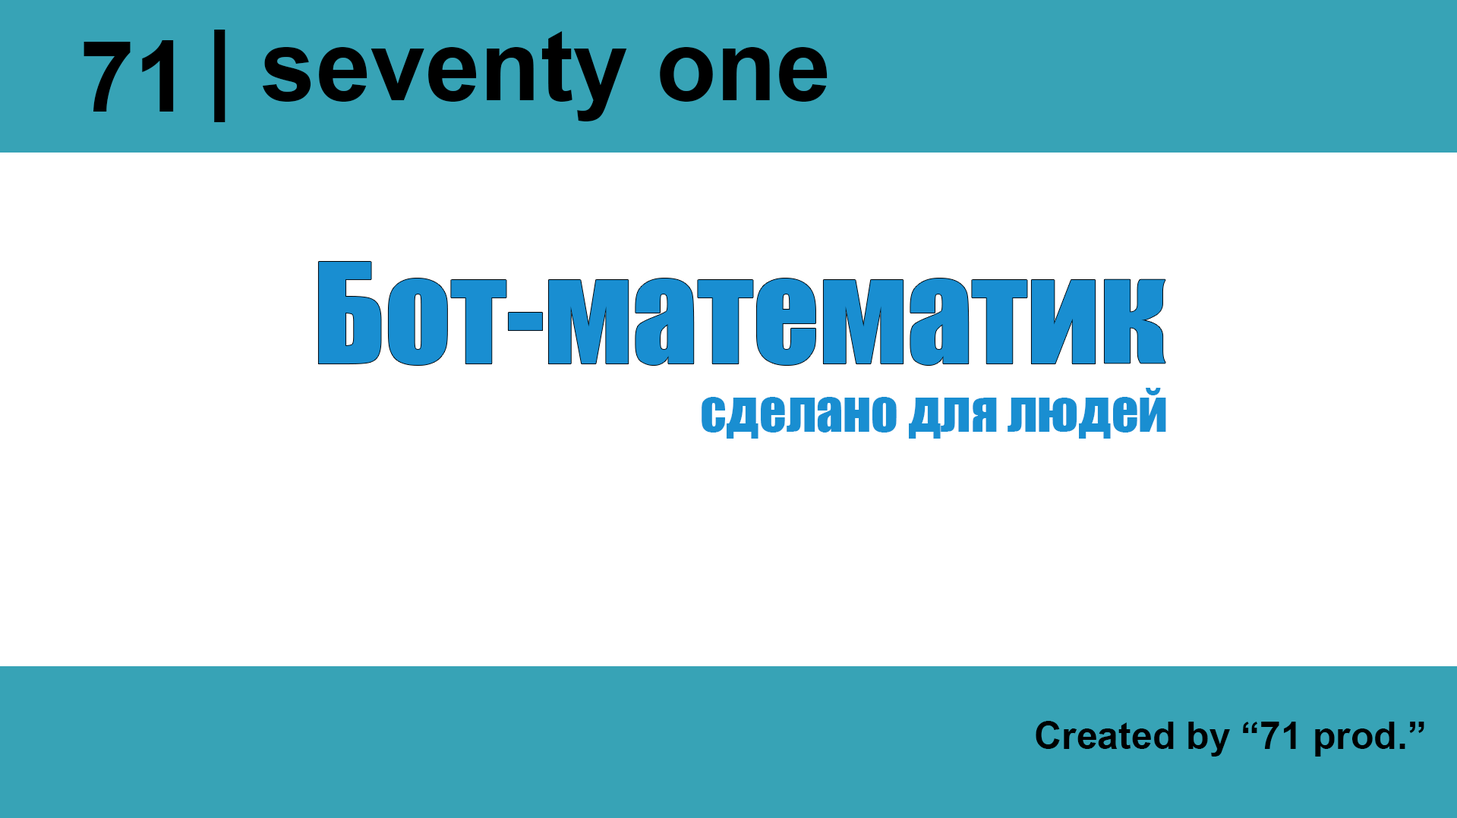
<style>
.page{position:relative;width:1457px;height:818px;background:#ffffff}
.page>*{position:absolute;margin:0}
.t1{font:98.7px "Arial-BoldMT";color:#000000}
.t2{font:129.1px "Impact";color:#198ed1}
.t3{font:53.1px "Impact";color:#198ed1}
.t4{font:38px "Arial-BoldMT";color:#000000}
</style>
<div class="page">
<p class="t1" style="left:214px;top:30px;width:614px;height:92px">| seventy one</p>
<p class="t1" style="left:84px;top:40px;width:90px;height:72px">71</p>
<p class="t2" style="left:318px;top:262px;width:847px;height:103px">Бот-математик</p>
<p class="t3" style="left:702px;top:388px;width:464px;height:51px">сделано для людей</p>
<p class="t4" style="left:1036px;top:721px;width:388px;height:36px">Created by “71 prod.”</p>
</div>
